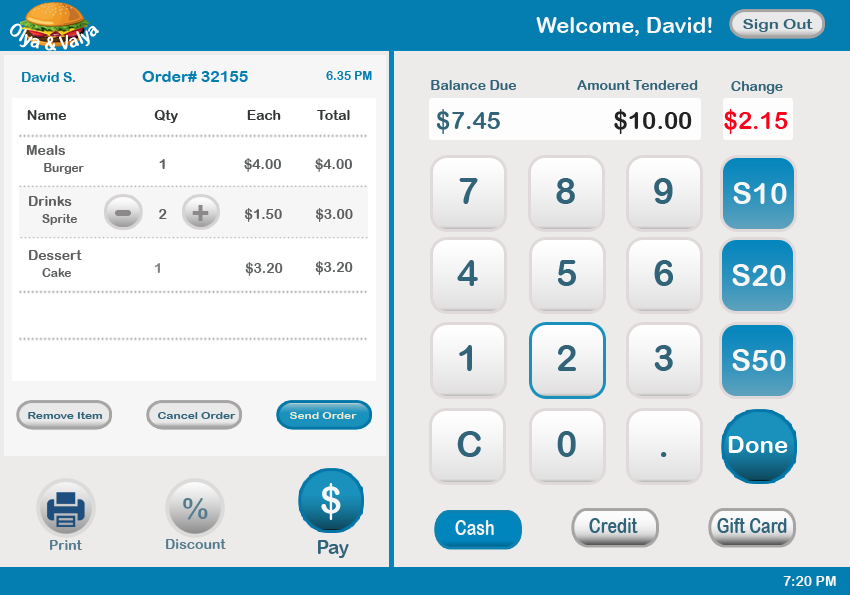
<style>
.page{position:relative;width:850px;height:595px;background:#edeaea}
.page>*{position:absolute;margin:0}
.t1{font:22px "ArialRoundedMTBold";color:#f7f6f6}
.t2{font:14px "ArialRoundedMTBold";color:#ffffff}
.t3{font:14px "ArialRoundedMTBold";color:#316379;scale:1.2 1}
.t4{font:14px "ArialRoundedMTBold";color:#047db1}
.t5{font:16px "ArialRoundedMTBold";color:#047db1}
.t6{font:12px "ArialRoundedMTBold";color:#047db1}
.t7{font:14px "ArialRoundedMTBold";color:#316379}
.t8{font:14px "ArialRoundedMTBold";color:#343535}
.t9{font:24px "ArialRoundedMTBold";color:#316379}
.t10{font:24px "ArialRoundedMTBold";color:#212222}
.t11{font:24px "ArialRoundedMTBold";color:#fa031a}
.t12{font:12px "ArialRoundedMTBold";color:#5b5d5e}
.t13{font:14px "ArialRoundedMTBold";color:#5b5d5e}
.t14{font:36px "ArialRoundedMTBold";color:#316379}
.t15{font:30px "ArialRoundedMTBold";color:#f7f6f6}
.t16{font:31.5px "ArialRoundedMTBold";color:#8b8989}
.t17{font:53.5px "ArialRoundedMTBold";color:#8b8989}
.t18{font:14px "ArialRoundedMTBold";color:#818384}
.t19{font:14px "ArialRoundedMTBold";color:#606263}
.t20{font:10px "ArialRoundedMTBold";color:#316379;scale:1.2 1}
.t21{font:10px "ArialRoundedMTBold";color:#efecd2;scale:1.2 1}
.t22{font:24px "ArialRoundedMTBold";color:#fefdfd}
.t23{font:37px "ArialRoundedMTBold";color:#f7f6f6}
.t24{font:30px "ArialRoundedMTBold";color:#537c8e}
.t25{font:21px "ArialRoundedMTBold";color:#f3f3f3;scale:0.77 1}
.t26{font:21px "ArialRoundedMTBold";color:#316379;scale:0.77 1}
.t27{font:14px "ArialRoundedMTBold";color:#537c8e}
.t28{font:18.5px "ArialRoundedMTBold";color:#316379}
.t29{font:14px "ArialRoundedMTBold";color:#f7f6f6}
</style>
<div class="page">
<p class="t1" style="left:536px;top:17px;width:176px;height:19px">Welcome, David!</p>
<p class="t2" style="left:10px;top:23px;width:89px;height:28px">Olya &amp; Valya</p>
<p class="t3" style="left:743px;top:19px;width:70px;height:13px">Sign Out</p>
<p class="t4" style="left:22px;top:72px;width:53px;height:10px">David S.</p>
<p class="t5" style="left:142px;top:71px;width:106px;height:11px">Order# 32155</p>
<p class="t6" style="left:326px;top:71px;width:46px;height:9px">6.35 PM</p>
<p class="t7" style="left:431px;top:80px;width:85px;height:10px">Balance Due</p>
<p class="t7" style="left:577px;top:80px;width:121px;height:10px">Amount Tendered</p>
<p class="t7" style="left:731px;top:81px;width:52px;height:13px">Change</p>
<p class="t8" style="left:27px;top:110px;width:39px;height:10px">Name</p>
<p class="t8" style="left:154px;top:110px;width:24px;height:13px">Qty</p>
<p class="t8" style="left:247px;top:110px;width:34px;height:10px">Each</p>
<p class="t8" style="left:317px;top:110px;width:33px;height:10px">Total</p>
<p class="t9" style="left:436px;top:109px;width:64px;height:25px">$7.45</p>
<p class="t10" style="left:614px;top:109px;width:78px;height:25px">$10.00</p>
<p class="t11" style="left:724px;top:109px;width:64px;height:25px">$2.15</p>
<p class="t12" style="left:26px;top:145px;width:58px;height:29px"><span class="t13">Meals<br>     </span>Burger</p>
<p class="t13" style="left:159px;top:159px;width:6px;height:10px">1</p>
<p class="t13" style="left:244px;top:158px;width:37px;height:14px">$4.00</p>
<p class="t13" style="left:315px;top:158px;width:37px;height:14px">$4.00</p>
<p class="t14" style="left:459px;top:178px;width:19px;height:26px">7</p>
<p class="t14" style="left:556px;top:178px;width:19px;height:26px">8</p>
<p class="t14" style="left:654px;top:178px;width:19px;height:26px">9</p>
<p class="t15" style="left:733px;top:182px;width:54px;height:22px">S10</p>
<p class="t13" style="left:29px;top:196px;width:48px;height:29px">Drinks<br>    <span class="t12">Sprite</span></p>
<p class="t13" style="left:159px;top:209px;width:8px;height:10px">2</p>
<p class="t16" style="left:192px;top:205px;width:17px;height:16px">+</p>
<p class="t13" style="left:245px;top:208px;width:37px;height:14px">$1.50</p>
<p class="t13" style="left:316px;top:208px;width:37px;height:14px">$3.00</p>
<p class="t17" style="left:115px;top:210px;width:17px;height:6px">-</p>
<p class="t13" style="left:29px;top:250px;width:53px;height:27px">Dessert<br>    <span class="t12">Cake</span></p>
<p class="t18" style="left:154px;top:263px;width:6px;height:10px">1</p>
<p class="t19" style="left:245px;top:262px;width:38px;height:14px">$3.20</p>
<p class="t13" style="left:315px;top:261px;width:38px;height:14px">$3.20</p>
<p class="t14" style="left:457px;top:260px;width:21px;height:26px">4</p>
<p class="t14" style="left:557px;top:260px;width:19px;height:26px">5</p>
<p class="t14" style="left:654px;top:260px;width:19px;height:26px">6</p>
<p class="t15" style="left:732px;top:264px;width:54px;height:22px">S20</p>
<p class="t14" style="left:459px;top:345px;width:13px;height:26px">1</p>
<p class="t14" style="left:558px;top:345px;width:18px;height:26px">2</p>
<p class="t14" style="left:654px;top:345px;width:19px;height:26px">3</p>
<p class="t15" style="left:732px;top:349px;width:54px;height:22px">S50</p>
<p class="t20" style="left:28px;top:412px;width:74px;height:7px">Remove Item</p>
<p class="t20" style="left:158px;top:412px;width:78px;height:7px">Cancel Order</p>
<p class="t21" style="left:290px;top:412px;width:67px;height:7px">Send Order</p>
<p class="t14" style="left:457px;top:431px;width:24px;height:26px">C</p>
<p class="t14" style="left:557px;top:431px;width:19px;height:26px">0</p>
<p class="t22" style="left:728px;top:436px;width:60px;height:17px">Done</p>
<p class="t14" style="left:661px;top:452px;width:6px;height:5px">.</p>
<p class="t23" style="left:321px;top:483px;width:20px;height:37px">$</p>
<p class="t24" style="left:183px;top:498px;width:25px;height:22px">%</p>
<p class="t25" style="left:455px;top:520px;width:39px;height:15px">Cash</p>
<p class="t26" style="left:589px;top:518px;width:49px;height:15px">Credit</p>
<p class="t26" style="left:717px;top:518px;width:70px;height:15px">Gift Card</p>
<p class="t27" style="left:50px;top:540px;width:32px;height:10px">Print</p>
<p class="t27" style="left:166px;top:539px;width:60px;height:10px">Discount</p>
<p class="t28" style="left:318px;top:540px;width:31px;height:18px">Pay</p>
<p class="t29" style="left:783px;top:576px;width:53px;height:10px">7:20 PM</p>
</div>
